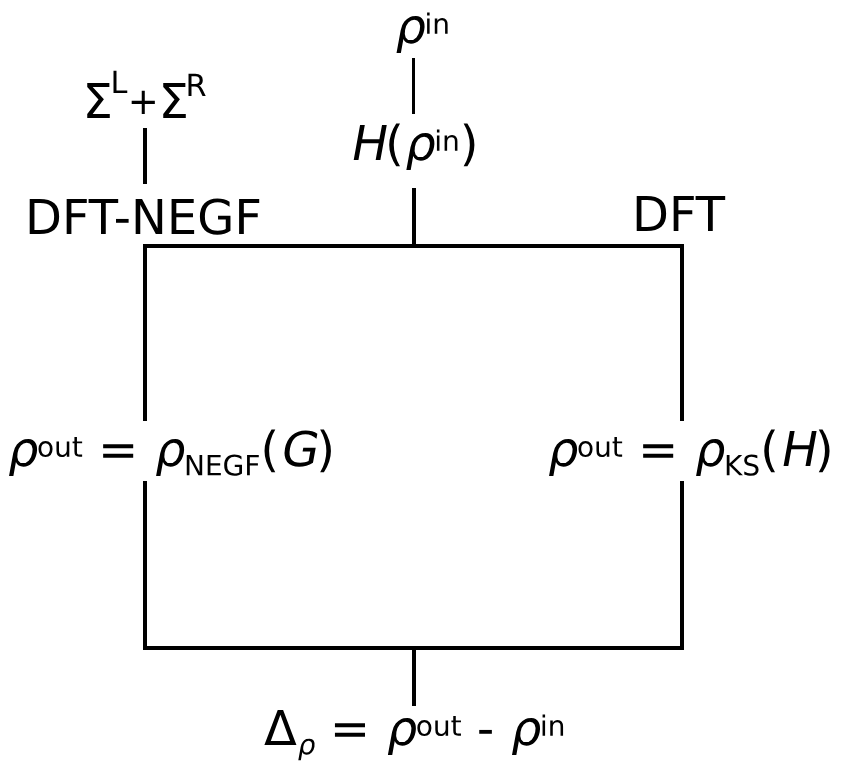
<style>
.page{position:relative;width:841px;height:766px;background:#ffffff}
.page>*{position:absolute;margin:0}
.t1{font:48px "DejaVuSans";color:#000000}
.t2{font:48px "DejaVuSans";color:#000000;font-style:italic}
.t3{font:52px "DejaVuSans";color:#000000}
.t4{font:37px "DejaVuSans";color:#000000}
</style>
<div class="page">
<p class="t1" style="left:396px;top:12px;width:52px;height:41px"><span class="t2">ρ</span>in</p>
<p class="t3" style="left:113px;top:70px;width:15px;height:23px">L</p>
<p class="t3" style="left:188px;top:73px;width:18px;height:23px">R</p>
<p class="t1" style="left:87px;top:83px;width:23px;height:35px"><span class="t3"> </span>Σ</p>
<p class="t1" style="left:163px;top:83px;width:23px;height:35px"><span class="t3"> </span>Σ</p>
<p class="t4" style="left:131px;top:90px;width:24px;height:24px">+</p>
<p class="t1" style="left:353px;top:123px;width:122px;height:47px"><span class="t2">H</span>(<span class="t2">ρ</span>in)</p>
<p class="t1" style="left:29px;top:198px;width:231px;height:37px">DFT-NEGF</p>
<p class="t1" style="left:636px;top:196px;width:90px;height:35px">DFT</p>
<p class="t1" style="left:9px;top:429px;width:322px;height:47px"><span class="t2">ρ</span>out = <span class="t2">ρ</span>NEGF(<span class="t2">G</span>)</p>
<p class="t1" style="left:549px;top:429px;width:281px;height:47px"><span class="t2">ρ</span>out = <span class="t2">ρ</span>KS(<span class="t2">H</span>)</p>
<p class="t1" style="left:264px;top:710px;width:300px;height:51px">Δ<span class="t2">ρ</span> = <span class="t2">ρ</span>out - <span class="t2">ρ</span>in</p>
</div>
